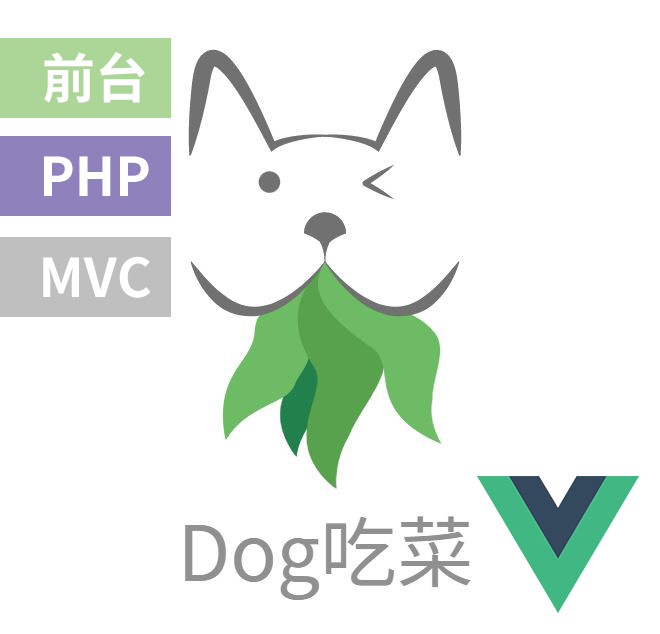
<style>
.page{position:relative;width:660px;height:634px;background:#ffffff}
.page>*{position:absolute;margin:0}
.t1{font:53.3px "NotoSansTC-Bold";color:#ffffff}
</style>
<div class="page">
<p class="t1" style="left:44px;top:52px;width:101px;height:51px">前台</p>
<p class="t1" style="left:44px;top:156px;width:105px;height:40px">PHP</p>
<p class="t1" style="left:43px;top:256px;width:108px;height:42px">MVC</p>
</div>
